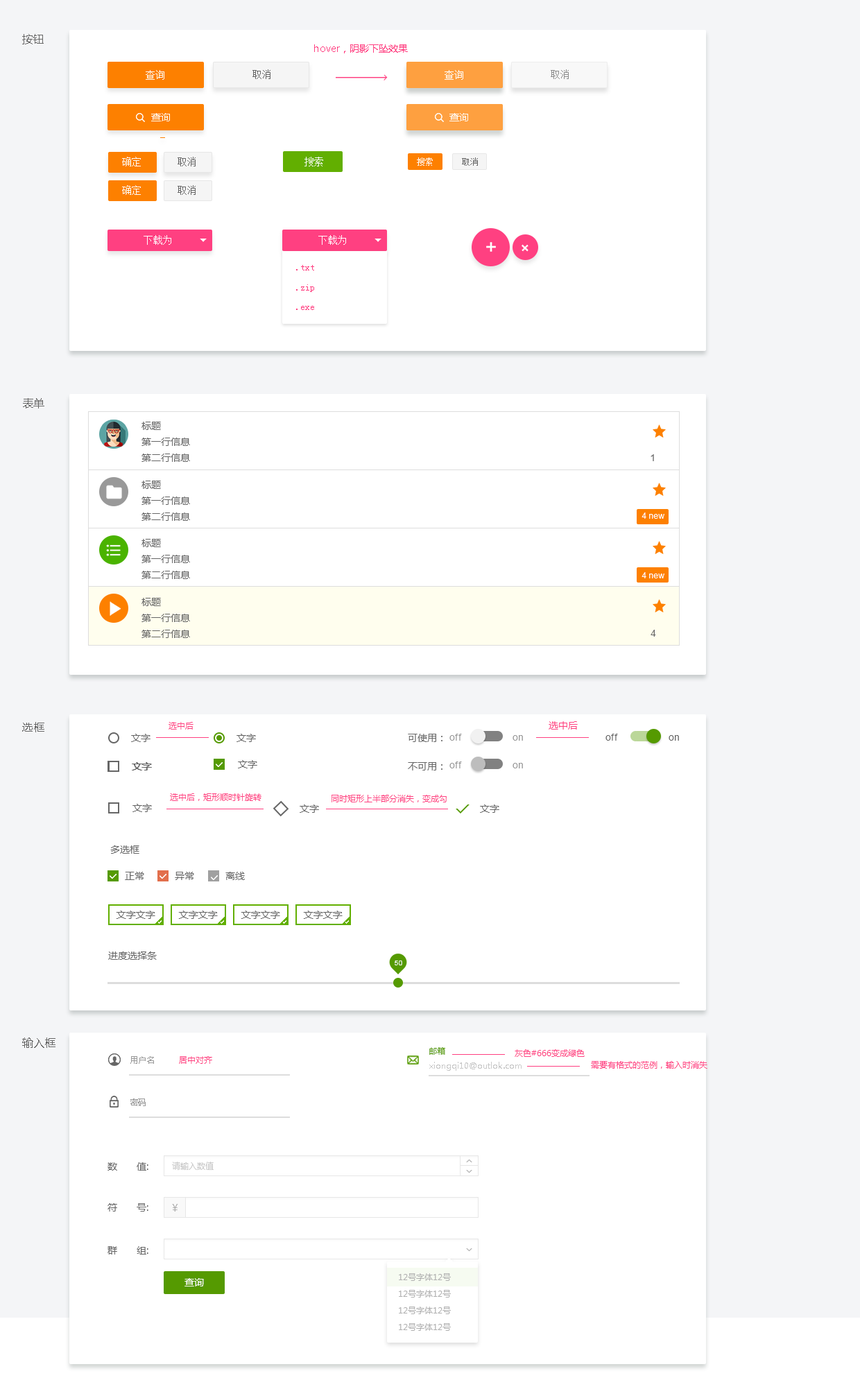
<style>
.page{position:relative;width:860px;height:1387px;background:#ffffff}
.page>*{position:absolute;margin:0}
.t1{font:11.1px "MicrosoftYaHei";color:#666666}
.t2{font:9.7px "MicrosoftYaHei";color:#ff4081}
.t3{font:9.7px "SimSun";color:#ffffff}
.t4{font:9.7px "SimSun";color:#666666}
.t5{font:9.7px "SimSun";color:#8c8c8c}
.t6{font:9.7px "MicrosoftYaHei";color:#ffffff}
.t7{font:8.3px "SimSun";color:#ffffff}
.t8{font:8.3px "SimSun";color:#666666}
.t9{font:9.7px "SimSun";color:#ff4081}
.t10{font:9.7px "MicrosoftYaHei";color:#666666}
.t11{font:9.7px "ArialMT";color:#666666}
.t12{font:8.3px "ArialMT";color:#ffffff}
.t13{font:8.3px "MicrosoftYaHei";color:#ff4081}
.t14{font:9.7px "ArialMT";color:#999999}
.t15{font:6.9px "ArialMT";color:#ffffff}
.t16{font:8.3px "MicrosoftYaHei";color:#559a01}
.t17{font:8.3px "MicrosoftYaHei";color:#999999}
.t18{font:8.3px "MicrosoftYaHei";color:#c8c8c8}
.t19{font:9.7px "MicrosoftYaHei";color:#b0b0b0}
.t20{font:8.3px "MicrosoftYaHei";color:#b0b0b0}
</style>
<div class="page">
<p class="t1" style="left:22px;top:34px;width:22px;height:10px">按钮</p>
<p class="t2" style="left:314px;top:44px;width:94px;height:9px">hover，阴影下坠效果</p>
<p class="t3" style="left:146px;top:70px;width:18px;height:10px">查询</p>
<p class="t4" style="left:252px;top:69px;width:18px;height:10px">取消</p>
<p class="t3" style="left:444px;top:70px;width:19px;height:10px">查询</p>
<p class="t5" style="left:551px;top:69px;width:18px;height:10px">取消</p>
<p class="t6" style="left:151px;top:113px;width:19px;height:8px">查询</p>
<p class="t6" style="left:449px;top:113px;width:19px;height:8px">查询</p>
<p class="t3" style="left:122px;top:157px;width:19px;height:9px">确定</p>
<p class="t4" style="left:178px;top:157px;width:18px;height:9px">取消</p>
<p class="t3" style="left:304px;top:157px;width:19px;height:9px">搜索</p>
<p class="t7" style="left:417px;top:157px;width:16px;height:9px">搜索</p>
<p class="t8" style="left:462px;top:157px;width:16px;height:9px">取消</p>
<p class="t3" style="left:122px;top:185px;width:19px;height:10px">确定</p>
<p class="t4" style="left:178px;top:185px;width:18px;height:10px">取消</p>
<p class="t3" style="left:144px;top:235px;width:27px;height:10px">下载为</p>
<p class="t3" style="left:318px;top:235px;width:28px;height:10px">下载为</p>
<p class="t9" style="left:296px;top:265px;width:18px;height:5px">.txt</p>
<p class="t9" style="left:296px;top:284px;width:18px;height:8px">.zip</p>
<p class="t9" style="left:296px;top:306px;width:18px;height:4px">.exe</p>
<p class="t1" style="left:23px;top:398px;width:21px;height:10px">表单</p>
<p class="t10" style="left:141px;top:422px;width:20px;height:8px">标题</p>
<p class="t10" style="left:141px;top:438px;width:49px;height:8px">第一行信息</p>
<p class="t10" style="left:141px;top:453px;width:49px;height:9px">第二行信息</p>
<p class="t11" style="left:650px;top:454px;width:4px;height:7px">1</p>
<p class="t10" style="left:141px;top:481px;width:20px;height:8px">标题</p>
<p class="t10" style="left:141px;top:496px;width:49px;height:9px">第一行信息</p>
<p class="t10" style="left:141px;top:512px;width:49px;height:9px">第二行信息</p>
<p class="t12" style="left:641px;top:512px;width:23px;height:7px">4 new</p>
<p class="t10" style="left:141px;top:539px;width:20px;height:8px">标题</p>
<p class="t10" style="left:141px;top:555px;width:49px;height:8px">第一行信息</p>
<p class="t10" style="left:141px;top:571px;width:49px;height:8px">第二行信息</p>
<p class="t12" style="left:641px;top:572px;width:23px;height:6px">4 new</p>
<p class="t10" style="left:141px;top:598px;width:20px;height:8px">标题</p>
<p class="t10" style="left:141px;top:614px;width:49px;height:8px">第一行信息</p>
<p class="t10" style="left:141px;top:630px;width:49px;height:8px">第二行信息</p>
<p class="t11" style="left:650px;top:630px;width:6px;height:7px">4</p>
<p class="t1" style="left:22px;top:722px;width:22px;height:10px">选框</p>
<p class="t13" style="left:168px;top:722px;width:25px;height:7px">选中后</p>
<p class="t2" style="left:548px;top:721px;width:30px;height:8px">选中后</p>
<p class="t10" style="left:131px;top:734px;width:19px;height:8px">文字</p>
<p class="t10" style="left:236px;top:734px;width:20px;height:8px">文字</p>
<p class="t10" style="left:408px;top:734px;width:34px;height:8px">可使用：</p>
<p class="t14" style="left:449px;top:734px;width:13px;height:7px">off</p>
<p class="t14" style="left:512px;top:735px;width:11px;height:6px">on</p>
<p class="t11" style="left:605px;top:734px;width:13px;height:7px">off</p>
<p class="t11" style="left:668px;top:735px;width:11px;height:6px">on</p>
<p class="t10" style="left:238px;top:760px;width:19px;height:8px">文字</p>
<p class="t14" style="left:449px;top:761px;width:13px;height:7px">off</p>
<p class="t10" style="left:132px;top:762px;width:19px;height:8px">文字</p>
<p class="t10" style="left:132px;top:762px;width:20px;height:8px">文字</p>
<p class="t10" style="left:408px;top:762px;width:34px;height:8px">不可用：</p>
<p class="t14" style="left:512px;top:763px;width:11px;height:5px">on</p>
<p class="t13" style="left:170px;top:793px;width:91px;height:8px">选中后，矩形顺时针旋转</p>
<p class="t13" style="left:331px;top:795px;width:116px;height:7px">同时矩形上半部分消失，变成勾</p>
<p class="t10" style="left:132px;top:804px;width:20px;height:8px">文字</p>
<p class="t10" style="left:300px;top:804px;width:19px;height:9px">文字</p>
<p class="t10" style="left:480px;top:804px;width:19px;height:9px">文字</p>
<p class="t10" style="left:110px;top:845px;width:29px;height:9px">多选框</p>
<p class="t10" style="left:125px;top:872px;width:19px;height:8px">正常</p>
<p class="t10" style="left:175px;top:872px;width:19px;height:8px">异常</p>
<p class="t10" style="left:225px;top:872px;width:20px;height:8px">离线</p>
<p class="t10" style="left:116px;top:910px;width:39px;height:9px">文字文字</p>
<p class="t10" style="left:178px;top:910px;width:40px;height:9px">文字文字</p>
<p class="t10" style="left:241px;top:910px;width:39px;height:9px">文字文字</p>
<p class="t10" style="left:303px;top:910px;width:40px;height:9px">文字文字</p>
<p class="t10" style="left:108px;top:951px;width:49px;height:9px">进度选择条</p>
<p class="t15" style="left:395px;top:960px;width:7px;height:5px">50</p>
<p class="t1" style="left:22px;top:1037px;width:33px;height:11px">输入框</p>
<p class="t16" style="left:429px;top:1047px;width:16px;height:8px">邮箱</p>
<p class="t13" style="left:515px;top:1049px;width:70px;height:8px">灰色#666变成绿色</p>
<p class="t17" style="left:130px;top:1056px;width:24px;height:8px">用户名</p>
<p class="t13" style="left:179px;top:1056px;width:33px;height:8px">居中对齐</p>
<p class="t18" style="left:429px;top:1062px;width:92px;height:9px">xiongqi10@outlok.com</p>
<p class="t13" style="left:591px;top:1061px;width:116px;height:8px">需要有格式的范例，输入时消失</p>
<p class="t17" style="left:130px;top:1098px;width:16px;height:8px">密码</p>
<p class="t10" style="left:107px;top:1162px;width:41px;height:8px">数       值:</p>
<p class="t18" style="left:172px;top:1161px;width:42px;height:9px">请输入数值</p>
<p class="t10" style="left:107px;top:1203px;width:41px;height:8px">符       号:</p>
<p class="t19" style="left:172px;top:1204px;width:6px;height:7px">￥</p>
<p class="t10" style="left:107px;top:1246px;width:41px;height:8px">群       组:</p>
<p class="t6" style="left:184px;top:1278px;width:20px;height:8px">查询</p>
<p class="t20" style="left:399px;top:1273px;width:52px;height:8px">12号字体12号</p>
<p class="t20" style="left:399px;top:1290px;width:52px;height:7px">12号字体12号</p>
<p class="t20" style="left:399px;top:1306px;width:52px;height:8px">12号字体12号</p>
<p class="t20" style="left:399px;top:1323px;width:52px;height:8px">12号字体12号</p>
</div>
